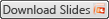
<style>
.page{position:relative;width:109px;height:19px}
.page>*{position:absolute;margin:0}
.t1{font:12px "SegoeUI";color:#404040}
</style>
<div class="page">
<p class="t1" style="left:3px;top:5px;width:87px;height:9px">Download Slides</p>
</div>
